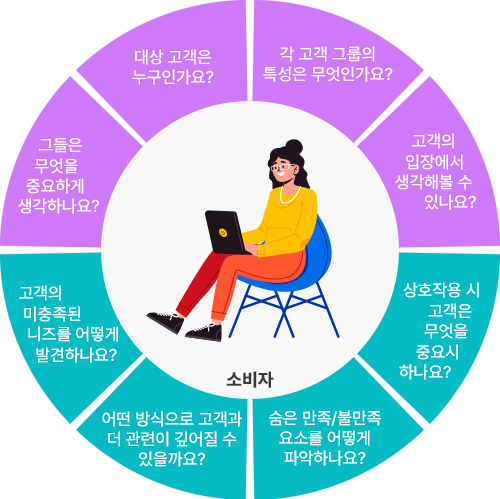
<style>
.page{position:relative;width:500px;height:499px;background:#ffffff}
.page>*{position:absolute;margin:0}
.t1{font:17px "Pretendard-Medium";color:#ffffff;text-transform:uppercase}
.t2{font:18.2px "Pretendard-ExtraBold";color:#373737;text-transform:uppercase}
</style>
<div class="page">
<p class="t1" style="left:132px;top:49px;width:82px;height:36px;text-align:center">대상 고객은<br>누구인가요?</p>
<p class="t1" style="left:263px;top:46px;width:130px;height:36px;text-align:center">각 고객 그룹의<br>특성은 무엇인가요?</p>
<p class="t1" style="left:395px;top:133px;width:81px;height:77px;text-align:right">고객의     <br>입장에서   <br>생각해볼 수 <br>있나요?</p>
<p class="t1" style="left:18px;top:138px;width:81px;height:76px">그들은 <br>    무엇을<br>  중요하게 <br>생각하나요?</p>
<p class="t1" style="left:19px;top:285px;width:99px;height:78px">고객의 <br> 미충족된<br>  니즈를 어떻게<br>    발견하나요?</p>
<p class="t1" style="left:399px;top:282px;width:80px;height:98px;text-align:right">상호작용 시<br>고객은  <br>무엇을   <br>중요시     <br>하나요?</p>
<p class="t2" style="left:226px;top:371px;width:48px;height:17px">소비자</p>
<p class="t1" style="left:102px;top:411px;width:140px;height:56px;text-align:center">어떤 방식으로 고객과<br>더 관련이 깊어질 수<br>있을까요?</p>
<p class="t1" style="left:269px;top:410px;width:112px;height:56px;text-align:center">숨은 만족/불만족<br>요소를 어떻게<br>파악하나요?</p>
</div>
